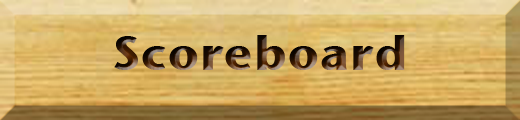
<style>
.page{position:relative;width:520px;height:120px}
.page>*{position:absolute;margin:0}
.t1{font:48px "StoneSansITC-Bold";letter-spacing:0.025em}
</style>
<div class="page">
<p class="t1" style="left:114px;top:35px;width:291px;height:35px">Scoreboard</p>
</div>
